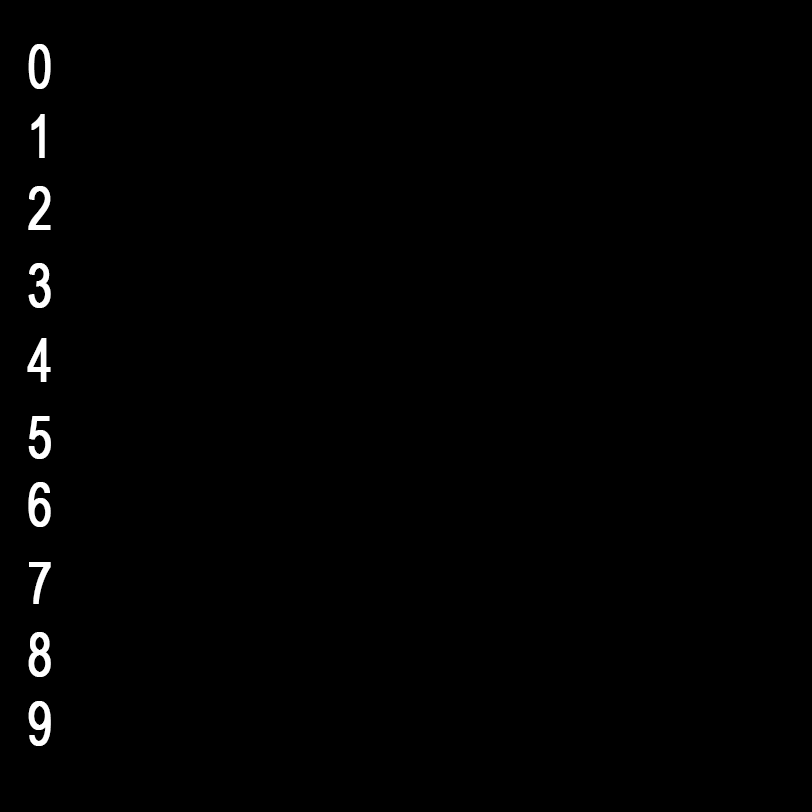
<style>
.page{position:relative;width:812px;height:812px;background:#000000}
.page>*{position:absolute;margin:0}
.t1{font:58.3px "ArialNarrow";color:#ffffff;font-weight:bold;scale:0.91 1}
</style>
<div class="page">
<p class="t1" style="left:28px;top:44px;width:23px;height:45px">0</p>
<p class="t1" style="left:31px;top:114px;width:14px;height:44px">1</p>
<p class="t1" style="left:28px;top:186px;width:23px;height:44px">2</p>
<p class="t1" style="left:28px;top:263px;width:23px;height:45px">3</p>
<p class="t1" style="left:27px;top:338px;width:24px;height:44px">4</p>
<p class="t1" style="left:28px;top:416px;width:23px;height:43px">5</p>
<p class="t1" style="left:28px;top:482px;width:23px;height:45px">6</p>
<p class="t1" style="left:29px;top:562px;width:22px;height:42px">7</p>
<p class="t1" style="left:28px;top:632px;width:23px;height:45px">8</p>
<p class="t1" style="left:28px;top:701px;width:23px;height:45px">9</p>
</div>
